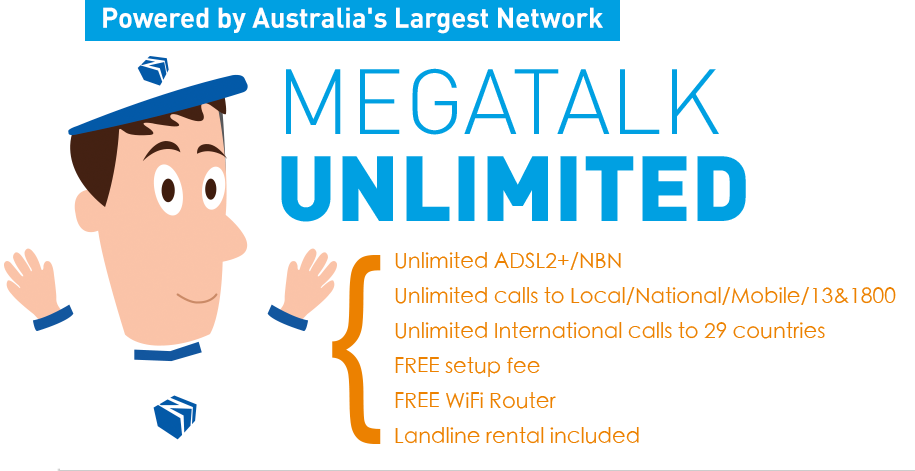
<style>
.page{position:relative;width:915px;height:471px;background:#ffffff}
.page>*{position:absolute;margin:0}
.t1{font:28px "DIN-Bold";color:#ffffff}
.t2{font:90.8px/87px "DIN-Black";color:#00a0e2}
.t3{font:90.8px/87px "DIN-Light";color:#00a0e2}
.t4{font:200.6px "STHeitiTC-Light";color:#ec8100;scale:0.85 1}
.t5{font:21px/35px "STHeitiTC-Light";color:#ec8100}
</style>
<div class="page">
<p class="t1" style="left:103px;top:7px;width:500px;height:27px">Powered by Australia's Largest Network</p>
<p class="t2" style="left:281px;top:68px;width:465px;height:154px"><span class="t3">MEGATALK<br></span>UNLIMITED</p>
<p class="t4" style="left:332px;top:255px;width:49px;height:189px">{</p>
<p class="t5" style="left:395px;top:252px;width:501px;height:192px">Unlimited ADSL2+/NBN<br>Unlimited calls to Local/National/Mobile/13&amp;1800<br>Unlimited International calls to 29 countries<br>FREE setup fee<br>FREE WiFi Router<br>Landline rental included</p>
</div>
